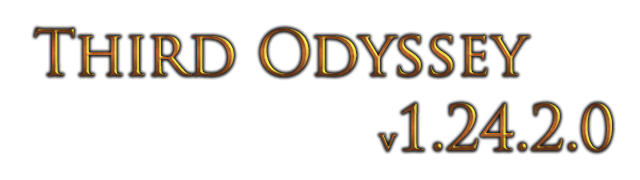
<style>
.page{position:relative;width:640px;height:180px;background:#ffffff}
.page>*{position:absolute;margin:0}
.t1{font:60.8px "TrajanPro-Regular"}
.t2{font:24px "TrajanPro-Regular"}
</style>
<div class="page">
<p class="t1" style="left:34px;top:28px;width:496px;height:49px">Third Odyssey</p>
<p class="t1" style="left:379px;top:103px;width:233px;height:49px"><span class="t2">v</span>1.24.2.0</p>
</div>
